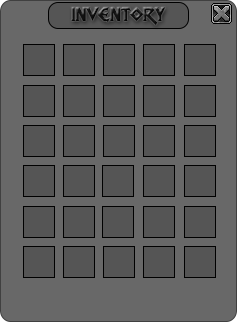
<style>
.page{position:relative;width:237px;height:322px;background:#686868}
.page>*{position:absolute;margin:0}
.t1{font:22px "DragonSlapper";color:#131313}
</style>
<div class="page">
<p class="t1" style="left:71px;top:7px;width:95px;height:19px">inventory</p>
</div>
